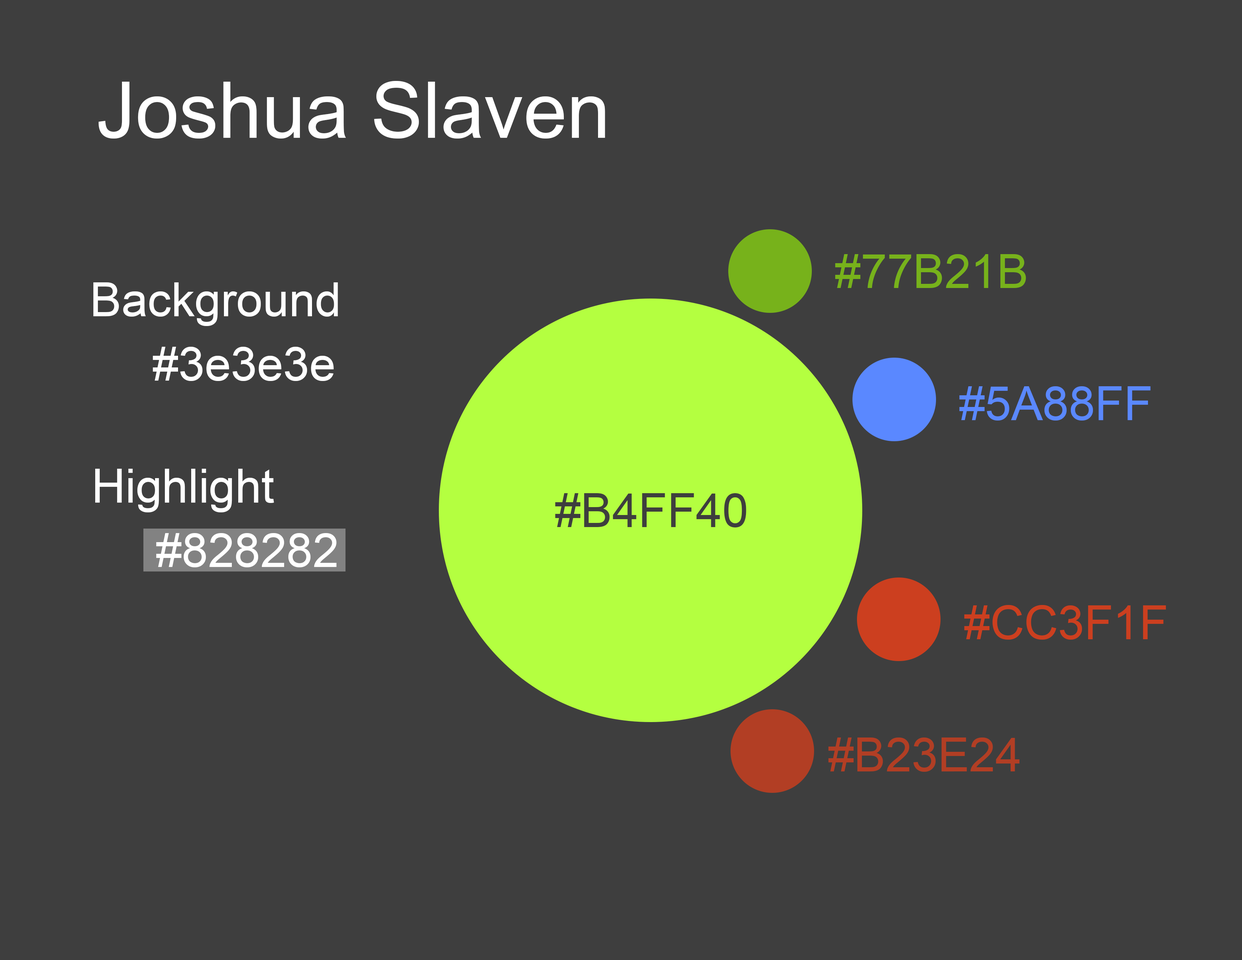
<style>
.page{position:relative;width:1242px;height:960px;background:#3e3e3e}
.page>*{position:absolute;margin:0}
.t1{font:78.4px "ArialMT";color:#ffffff}
.t2{font:47.1px "ArialMT";color:#77b21b}
.t3{font:47.1px "ArialMT";color:#ffffff}
.t4{font:47.1px "ArialMT";color:#5a88ff}
.t5{font:47.1px "ArialMT";color:#3e3e3e}
.t6{font:47.1px "ArialMT";color:#cc3f1f}
.t7{font:47.1px "ArialMT";color:#b23e24}
</style>
<div class="page">
<p class="t1" style="left:99px;top:81px;width:506px;height:58px">Joshua Slaven</p>
<p class="t2" style="left:835px;top:254px;width:191px;height:34px">#77B21B</p>
<p class="t3" style="left:93px;top:282px;width:245px;height:44px">Background</p>
<p class="t3" style="left:153px;top:347px;width:181px;height:34px">#3e3e3e</p>
<p class="t4" style="left:960px;top:386px;width:191px;height:34px">#5A88FF</p>
<p class="t3" style="left:95px;top:469px;width:179px;height:43px">Highlight</p>
<p class="t5" style="left:555px;top:493px;width:191px;height:34px">#B4FF40</p>
<p class="t3" style="left:156px;top:533px;width:181px;height:34px">#828282</p>
<p class="t6" style="left:964px;top:605px;width:202px;height:35px">#CC3F1F</p>
<p class="t7" style="left:829px;top:737px;width:191px;height:35px">#B23E24</p>
</div>
